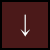
<style>
.page{position:relative;width:50px;height:50px;background:#4b1919}
.page>*{position:absolute;margin:0}
.t1{font:24px "H2gtrE";color:#ffffff}
</style>
<div class="page">
<p class="t1" style="left:20px;top:14px;width:10px;height:23px">↓</p>
</div>
